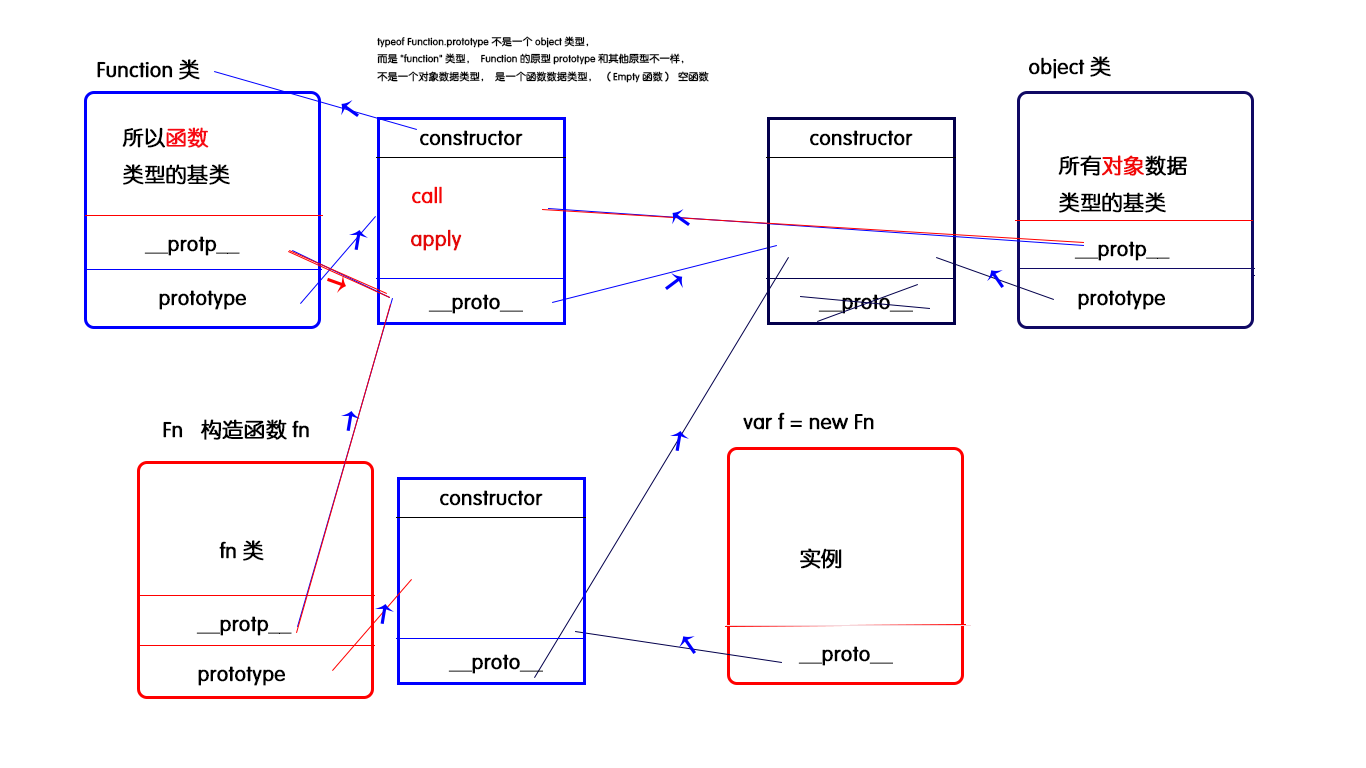
<style>
.page{position:relative;width:1366px;height:768px;background:#ffffff}
.page>*{position:absolute;margin:0}
.t1{font:10px "FZY3JW--GB1-0";color:#000000;font-weight:bold}
.t2{font:21px "FZY3JW--GB1-0";color:#000000;font-weight:bold}
.t3{font:21px "FZY3JW--GB1-0";color:#f70813;font-weight:bold}
.t4{font:21px "FZY3JW--GB1-0";color:#f10808;font-weight:bold}
.t5{font:21px "FZY3JW--GB1-0";color:#f50606;font-weight:bold}
.t6{font:21px "FZY3JW--GB1-0";color:#e40808;font-weight:bold}
</style>
<div class="page">
<p class="t1" style="left:377px;top:36px;width:332px;height:47px">typeof Function.prototype 不是一个object类型，<br>而是"function"类型，Function的原型prototype和其他原型不一样，<br>不是一个对象数据类型，是一个函数数据类型，（Empty函数）空函数</p>
<p class="t2" style="left:97px;top:59px;width:103px;height:21px">Function类</p>
<p class="t2" style="left:1029px;top:56px;width:82px;height:23px">object类</p>
<p class="t2" style="left:122px;top:127px;width:108px;height:58px">所以<span class="t3">函数<br></span>类型的基类</p>
<p class="t2" style="left:420px;top:130px;width:103px;height:16px">constructor</p>
<p class="t2" style="left:810px;top:130px;width:103px;height:16px">constructor</p>
<p class="t2" style="left:1058px;top:155px;width:130px;height:58px">所有<span class="t4">对象</span>数据<br>类型的基类</p>
<p class="t5" style="left:412px;top:186px;width:30px;height:18px">call</p>
<p class="t6" style="left:411px;top:229px;width:51px;height:22px">apply</p>
<p class="t2" style="left:144px;top:236px;width:96px;height:20px">__protp__</p>
<p class="t2" style="left:1074px;top:241px;width:96px;height:20px">__protp__</p>
<p class="t2" style="left:159px;top:290px;width:87px;height:20px">prototype</p>
<p class="t2" style="left:428px;top:294px;width:95px;height:20px">__proto__</p>
<p class="t2" style="left:818px;top:294px;width:95px;height:20px">__proto__</p>
<p class="t2" style="left:1078px;top:290px;width:87px;height:20px">prototype</p>
<p class="t2" style="left:743px;top:412px;width:131px;height:18px">var f = new Fn</p>
<p class="t2" style="left:163px;top:419px;width:146px;height:21px">Fn   构造函数fn</p>
<p class="t2" style="left:440px;top:490px;width:103px;height:16px">constructor</p>
<p class="t2" style="left:219px;top:540px;width:45px;height:21px">fn类</p>
<p class="t2" style="left:800px;top:548px;width:42px;height:21px">实例</p>
<p class="t2" style="left:196px;top:616px;width:96px;height:20px">__protp__</p>
<p class="t2" style="left:448px;top:654px;width:95px;height:20px">__proto__</p>
<p class="t2" style="left:798px;top:646px;width:95px;height:20px">__proto__</p>
<p class="t2" style="left:198px;top:666px;width:87px;height:20px">prototype</p>
</div>
